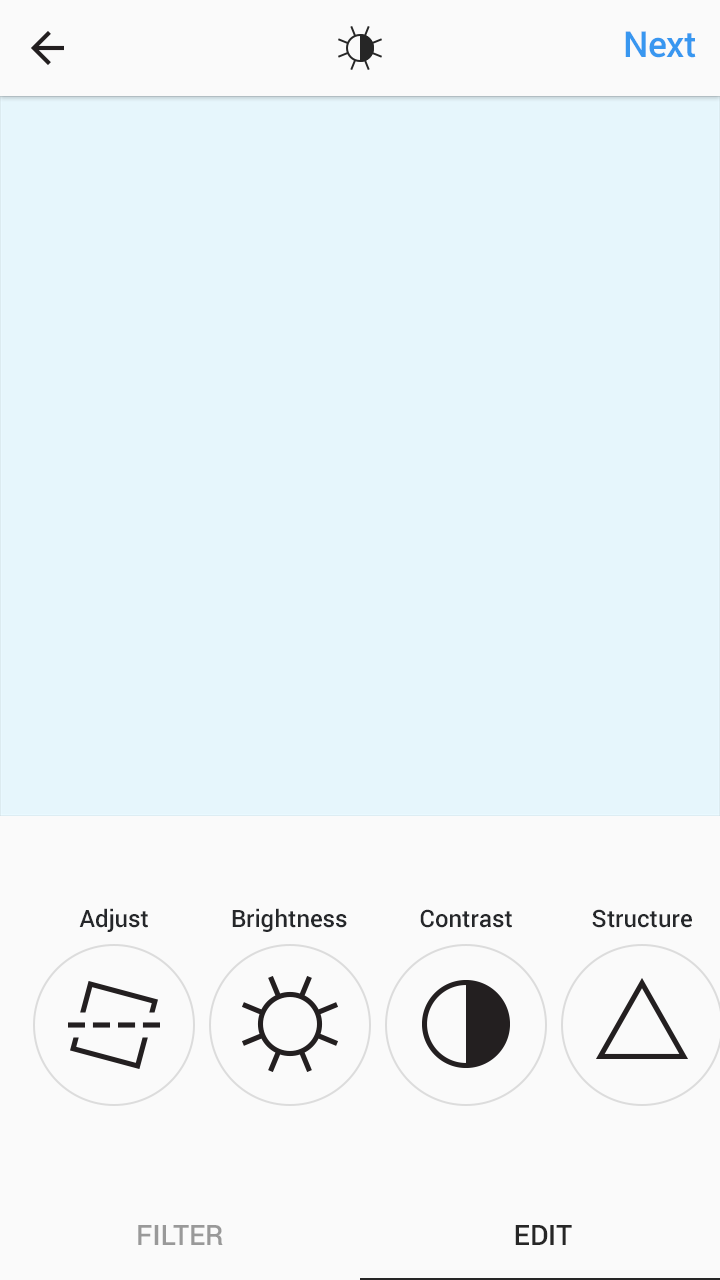
<style>
.page{position:relative;width:720px;height:1280px;background:#e6f6fc}
.page>*{position:absolute;margin:0}
.t1{font:36px "Roboto-Medium";letter-spacing:-0.025em;color:#3897f0}
.t2{font:24px "Roboto-Medium";color:#25272a}
.t3{font:28px "Roboto-Medium";color:#999999}
.t4{font:28px "Roboto-Medium";color:#262626}
</style>
<div class="page">
<p class="t1" style="left:625px;top:31px;width:71px;height:27px">Next</p>
<p class="t2" style="left:79px;top:908px;width:69px;height:24px">Adjust</p>
<p class="t2" style="left:232px;top:908px;width:115px;height:24px">Brightness</p>
<p class="t2" style="left:420px;top:909px;width:92px;height:19px">Contrast</p>
<p class="t2" style="left:592px;top:909px;width:100px;height:19px">Structure</p>
<p class="t3" style="left:138px;top:1225px;width:85px;height:20px">FILTER</p>
<p class="t4" style="left:515px;top:1225px;width:57px;height:20px">EDIT</p>
</div>
